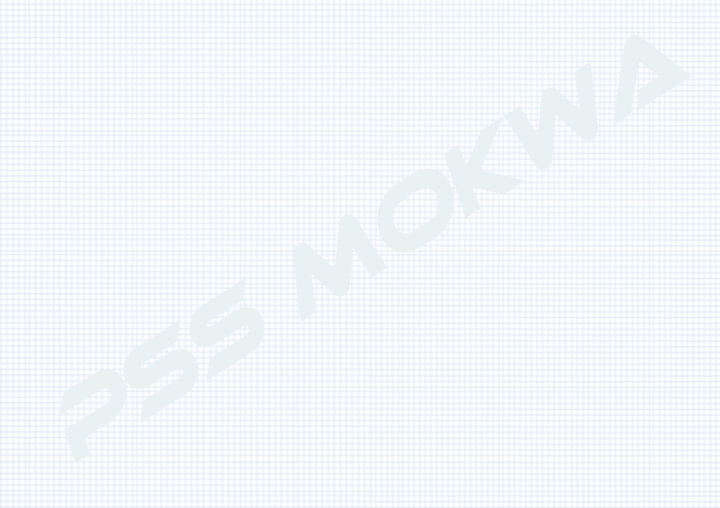
<style>
.page{position:relative;width:720px;height:508px}
.page>*{position:absolute;margin:0}
.t1{font:94.5px "Ethnocentric";color:#eaf1f3;scale:0.82 1}
</style>
<div class="page">
<p class="t1" style="left:59px;top:34px;width:633px;height:430px;rotate:-32deg">pss mokwa</p>
</div>
